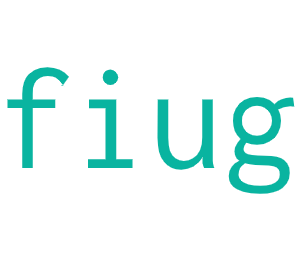
<style>
.page{position:relative;width:300px;height:275px;background:#ffffff}
.page>*{position:absolute;margin:0}
.t1{font:150px "Inconsolata-Regular";color:#09b4a0}
</style>
<div class="page">
<p class="t1" style="left:7px;top:67px;width:288px;height:127px">fiug</p>
</div>
